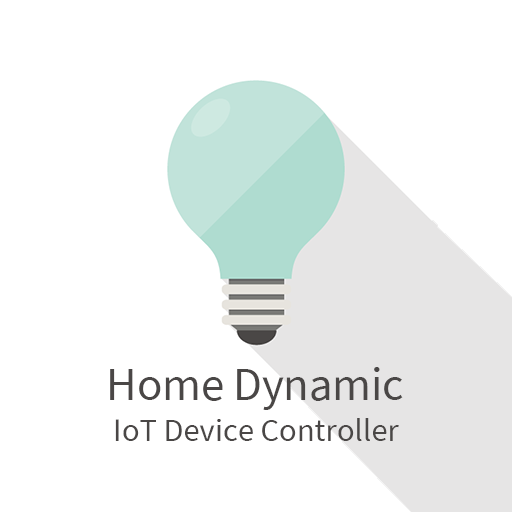
<style>
.page{position:relative;width:512px;height:512px;background:#ffffff}
.page>*{position:absolute;margin:0}
.t1{font:41.7px "TaipeiSansTCBeta-Regular";color:#4a4746}
.t2{font:29.2px "TaipeiSansTCBeta-Regular";color:#4a4746}
</style>
<div class="page">
<p class="t1" style="left:110px;top:367px;width:293px;height:43px">Home Dynamic</p>
<p class="t2" style="left:115px;top:418px;width:284px;height:23px">IoT Device Controller</p>
</div>
